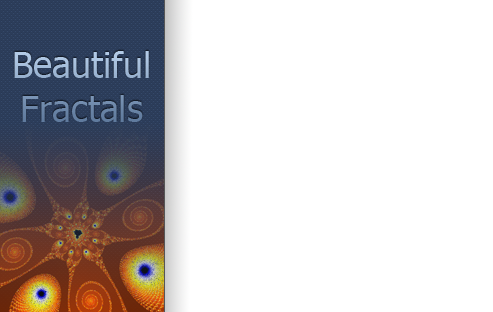
<style>
.page{position:relative;width:493px;height:312px;background:#ffffff}
.page>*{position:absolute;margin:0}
.t1{font:36px "Tahoma"}
</style>
<div class="page">
<p class="t1" style="left:14px;top:51px;width:135px;height:71px;text-align:center">Beautiful<br>Fractals</p>
</div>
